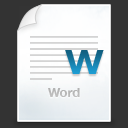
<style>
.page{position:relative;width:128px;height:128px;background:#333333}
.page>*{position:absolute;margin:0}
.t1{font:34.3px "HelveticaNeue-Bold";scale:1.2 1}
.t2{font:13px "HelveticaNeue-Bold";color:#cccccc}
</style>
<div class="page">
<p class="t1" style="left:65px;top:50px;width:39px;height:24px">W</p>
<p class="t2" style="left:48px;top:88px;width:32px;height:9px">Word</p>
</div>
